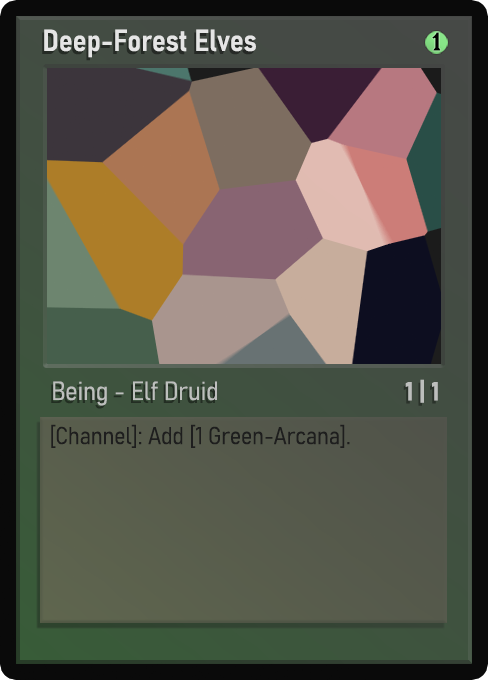
<style>
.page{position:relative;width:488px;height:680px}
.page>*{position:absolute;margin:0}
.t1{font:30px "Bahnschrift-SemiBoldSemiCondensed";color:#f2f2f2;font-weight:bold}
.t2{font:25px "WTRRoycroft";color:#000000;font-weight:bold;scale:1.09 1}
.t3{font:26px "Bahnschrift-LightSemiCondensed";color:#c8c8c8;font-weight:bold}
.t4{font:26px "Bahnschrift-BoldSemiCondensed";color:#bdbfbd;font-weight:bold}
.t5{font:24px "Bahnschrift-LightSemiCondensed";color:#1e1e1e;font-weight:bold}
</style>
<div class="page">
<p class="t1" style="left:44px;top:29px;width:212px;height:29px;opacity:0.9">Deep-Forest Elves</p>
<p class="t2" style="left:432px;top:32px;width:9px;height:19px">1</p>
<p class="t3" style="left:53px;top:381px;width:164px;height:25px;opacity:0.9">Being - Elf Druid</p>
<p class="t4" style="left:405px;top:379px;width:33px;height:24px">1 | 1</p>
<p class="t5" style="left:51px;top:424px;width:299px;height:24px">[Channel]: Add [1 Green-Arcana].</p>
</div>
